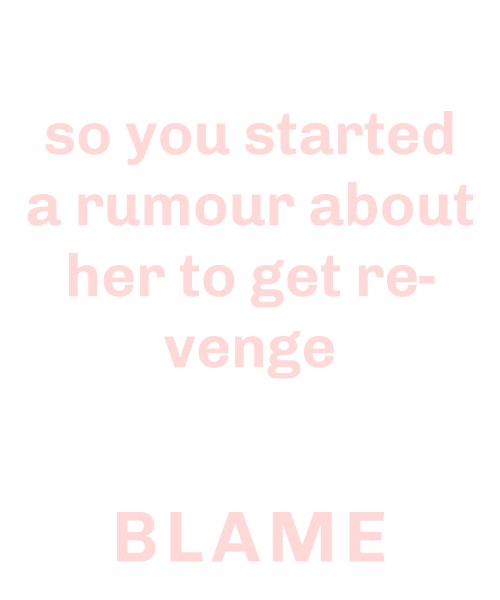
<style>
.page{position:relative;width:500px;height:600px;background:#ffffff}
.page>*{position:absolute;margin:0}
.t1{font:60px/71px "Chivo-Bold";color:#ffd8d8}
.t2{font:72px "Chivo-Bold";letter-spacing:0.1em;color:#ffd8d8}
</style>
<div class="page">
<p class="t1" style="left:27px;top:111px;width:446px;height:268px;text-align:center">so you started a rumour about her to get revenge</p>
<p class="t2" style="left:117px;top:512px;width:268px;height:50px">BLAME</p>
</div>
